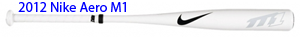
<style>
.page{position:relative;width:300px;height:37px;background:#ffffff}
.page>*{position:absolute;margin:0}
.t1{font:14px "MyriadPro-Regular";color:#0000ff}
</style>
<div class="page">
<p class="t1" style="left:18px;top:2px;width:108px;height:10px">2012 Nike Aero M1</p>
</div>
